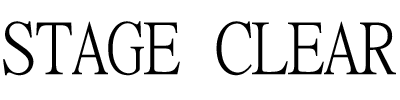
<style>
.page{position:relative;width:400px;height:100px;background:#ffffff}
.page>*{position:absolute;margin:0}
.t1{font:72px "MingLiU";color:#000000}
</style>
<div class="page">
<p class="t1" style="left:3px;top:21px;width:393px;height:55px">STAGE CLEAR</p>
</div>
